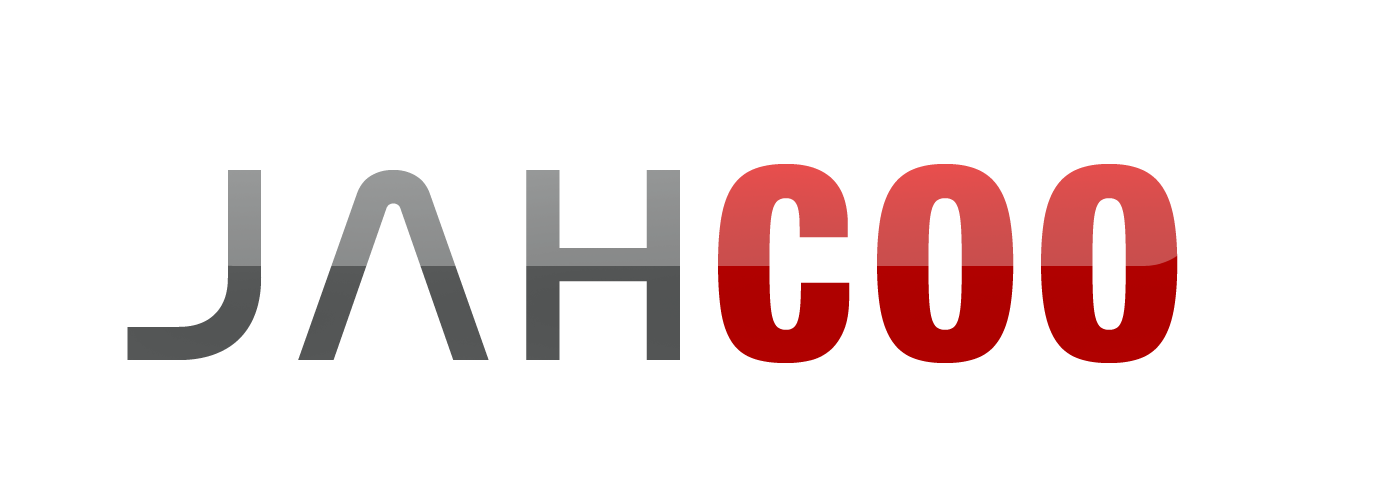
<style>
.page{position:relative;width:1382px;height:504px;background:#ffffff}
.page>*{position:absolute;margin:0}
.t1{font:303px "Nasalization";letter-spacing:0.06em;text-transform:uppercase}
.t2{font:269.3px "HelveticaNeue-CondensedBlack";letter-spacing:0.06em;text-transform:uppercase}
</style>
<div class="page">
<p class="t1" style="left:127px;top:164px;width:1051px;height:199px">jah<span class="t2">coo</span></p>
</div>
